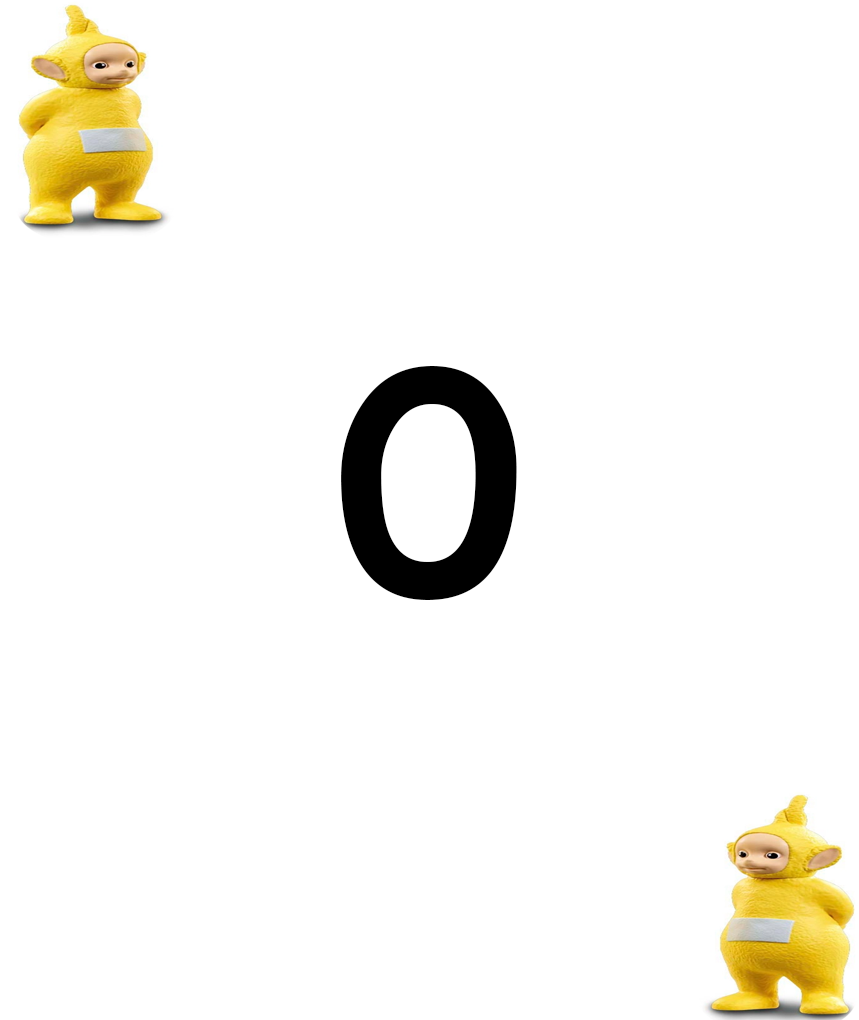
<style>
.page{position:relative;width:859px;height:1020px;background:#ffffff}
.page>*{position:absolute;margin:0}
.t1{font:300px "ComicSansMS-Bold";color:#000000;font-variant:small-caps}
</style>
<div class="page">
<p class="t1" style="left:341px;top:366px;width:176px;height:234px">0</p>
</div>
